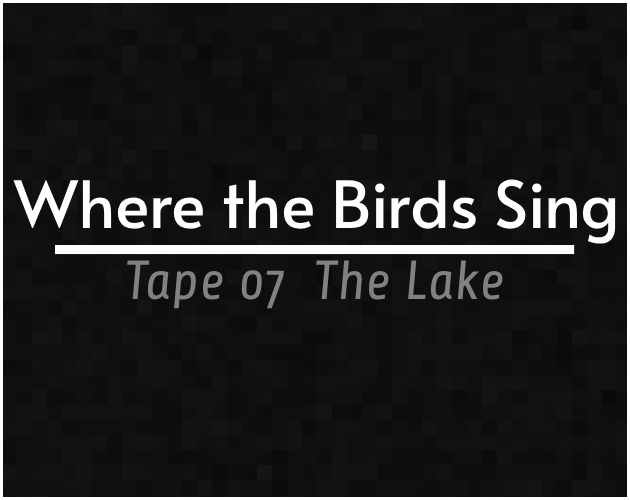
<style>
.page{position:relative;width:630px;height:500px}
.page>*{position:absolute;margin:0}
.t1{font:65px "Alata-Regular";color:#ffffff}
.t2{font:55px "Share-ItalicOSF";color:#818181}
</style>
<div class="page">
<p class="t1" style="left:13px;top:179px;width:603px;height:65px">Where the Birds Sing</p>
<p class="t2" style="left:127px;top:260px;width:376px;height:49px">Tape 07  The Lake</p>
</div>
